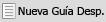
<style>
.page{position:relative;width:106px;height:22px;background:#dcdcdc}
.page>*{position:absolute;margin:0}
.t1{font:11px "Tahoma";color:#060606}
</style>
<div class="page">
<p class="t1" style="left:18px;top:6px;width:86px;height:11px">Nueva Guía Desp.</p>
</div>
